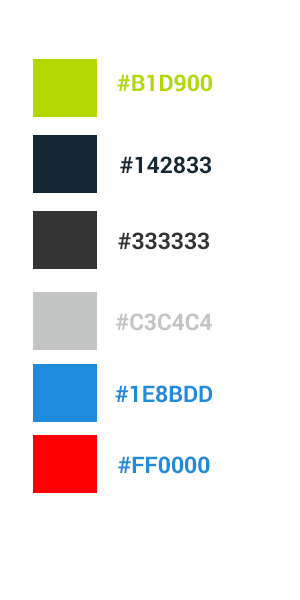
<style>
.page{position:relative;width:300px;height:600px;background:#ffffff}
.page>*{position:absolute;margin:0}
.t1{font:22.9px "Roboto-Bold";color:#b1d900;text-transform:uppercase}
.t2{font:22.9px "Roboto-Bold";color:#142833;text-transform:uppercase}
.t3{font:22.9px "Roboto-Bold";color:#333333;text-transform:uppercase}
.t4{font:22.9px "Roboto-Bold";color:#c3c4c4;text-transform:uppercase}
.t5{font:22.9px "Roboto-Bold";color:#1e8bdd;text-transform:uppercase}
</style>
<div class="page">
<p class="t1" style="left:117px;top:74px;width:95px;height:18px">#b1d900</p>
<p class="t2" style="left:120px;top:156px;width:91px;height:18px">#142833</p>
<p class="t3" style="left:118px;top:232px;width:91px;height:18px">#333333</p>
<p class="t4" style="left:116px;top:313px;width:96px;height:18px">#c3c4c4</p>
<p class="t5" style="left:115px;top:385px;width:97px;height:18px">#1e8bdd</p>
<p class="t5" style="left:118px;top:456px;width:92px;height:18px">#ff0000</p>
</div>
